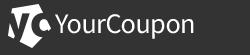
<style>
.page{position:relative;width:250px;height:55px;background:#333333}
.page>*{position:absolute;margin:0}
.t1{font:28.2px "SourceSansPro-Regular";letter-spacing:-0.02em;color:#ffffff}
</style>
<div class="page">
<p class="t1" style="left:55px;top:14px;width:139px;height:25px">YourCoupon</p>
</div>
